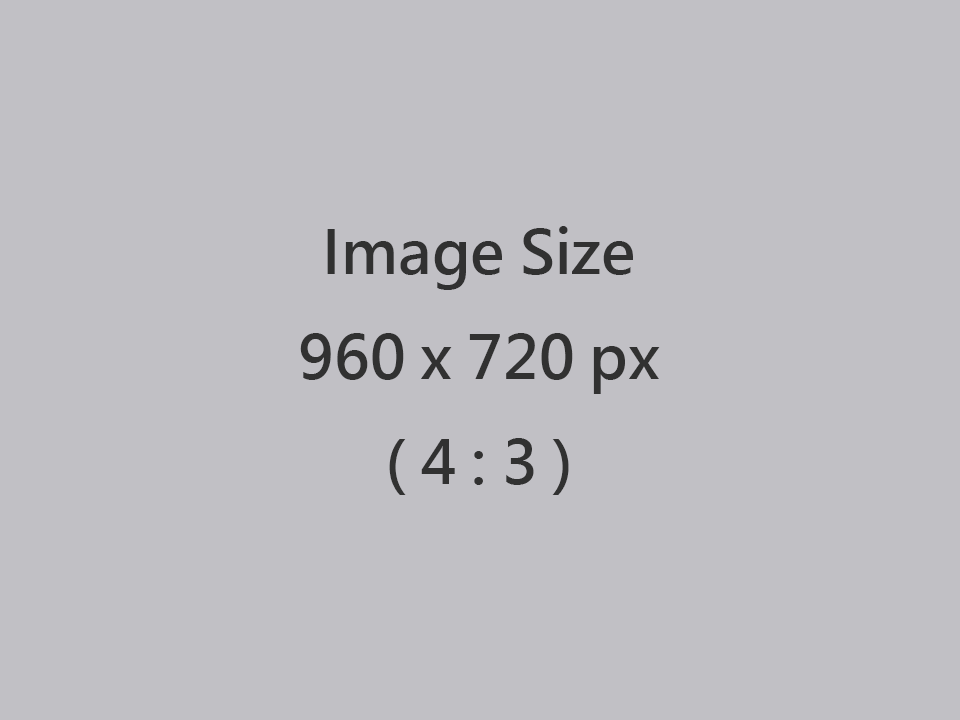
<style>
.page{position:relative;width:960px;height:720px;background:#c1c0c5}
.page>*{position:absolute;margin:0}
.t1{font:60px "MicrosoftJhengHeiBold";color:#313131}
</style>
<div class="page">
<p class="t1" style="left:300px;top:226px;width:360px;height:269px;text-align:center">Image Size<br>960 x 720 px<br>( 4 : 3 )</p>
</div>
